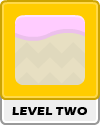
<style>
.page{position:relative;width:100px;height:125px;background:#ffcc00}
.page>*{position:absolute;margin:0}
.t1{font:12px "ErasITC-Bold";letter-spacing:0.025em;color:#000000}
</style>
<div class="page">
<p class="t1" style="left:12px;top:107px;width:75px;height:8px">LEVEL TWO</p>
</div>
